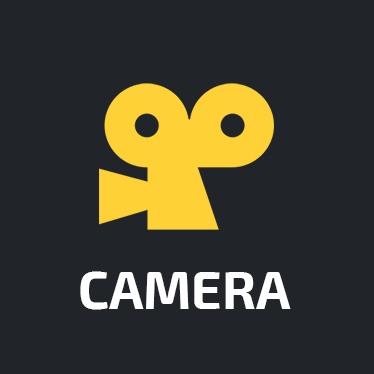
<style>
.page{position:relative;width:374px;height:374px;background:#212529}
.page>*{position:absolute;margin:0}
.t1{font:52.9px "Exo2-Bold";color:#ffffff}
</style>
<div class="page">
<p class="t1" style="left:80px;top:271px;width:211px;height:39px">CAMERA</p>
</div>
